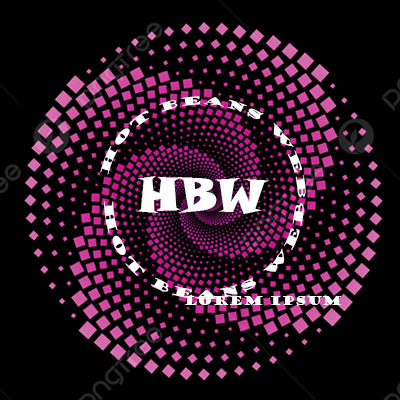
<style>
.page{position:relative;width:400px;height:400px;background:#000000}
.page>*{position:absolute;margin:0}
.t1{font:11px "GoudyStout";color:#ffffff}
.t2{font:24px "GoudyStout";color:#ffffff}
.t3{font:48px "SnapITC-Regular";color:#ffffff}
.t4{font:12px "GoudyStout";color:#ffffff}
</style>
<div class="page">
<p class="t1" style="left:100px;top:96px;width:206px;height:101px"><span class="t2"> </span>hot beans web</p>
<p class="t3" style="left:137px;top:176px;width:132px;height:38px">HBW</p>
<p class="t4" style="left:104px;top:201px;width:200px;height:99px">hot beans web</p>
<p class="t4" style="left:184px;top:296px;width:158px;height:10px">Lorem Ipsum</p>
</div>
